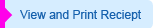
<style>
.page{position:relative;width:153px;height:28px;background:#d6edff}
.page>*{position:absolute;margin:0}
.t1{font:12px "ArialMT";color:#1661ad}
</style>
<div class="page">
<p class="t1" style="left:20px;top:10px;width:121px;height:11px">View and Print Reciept</p>
</div>
